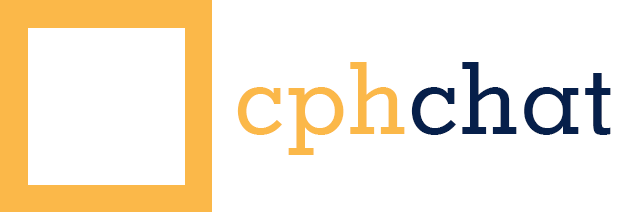
<style>
.page{position:relative;width:642px;height:212px;background:#ffffff}
.page>*{position:absolute;margin:0}
.t1{font:100px "MemphisLTStd-Medium";letter-spacing:0.005em;color:#061f4a}
.t2{font:100px "MemphisLTStd-Medium";letter-spacing:0.005em;color:#fbb849}
</style>
<div class="page">
<p class="t1" style="left:237px;top:62px;width:374px;height:93px"><span class="t2">cph</span>chat</p>
</div>
